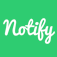
<style>
.page{position:relative;width:57px;height:57px;background:#2ecc71}
.page>*{position:absolute;margin:0}
.t1{font:18.8px "Pacifico";color:#ffffff}
.t2{font:18.8px "Pacifico";color:#2ecc71}
</style>
<div class="page">
<p class="t1" style="left:3px;top:18px;width:56px;height:26px">Notify<span class="t2">.</span></p>
</div>
